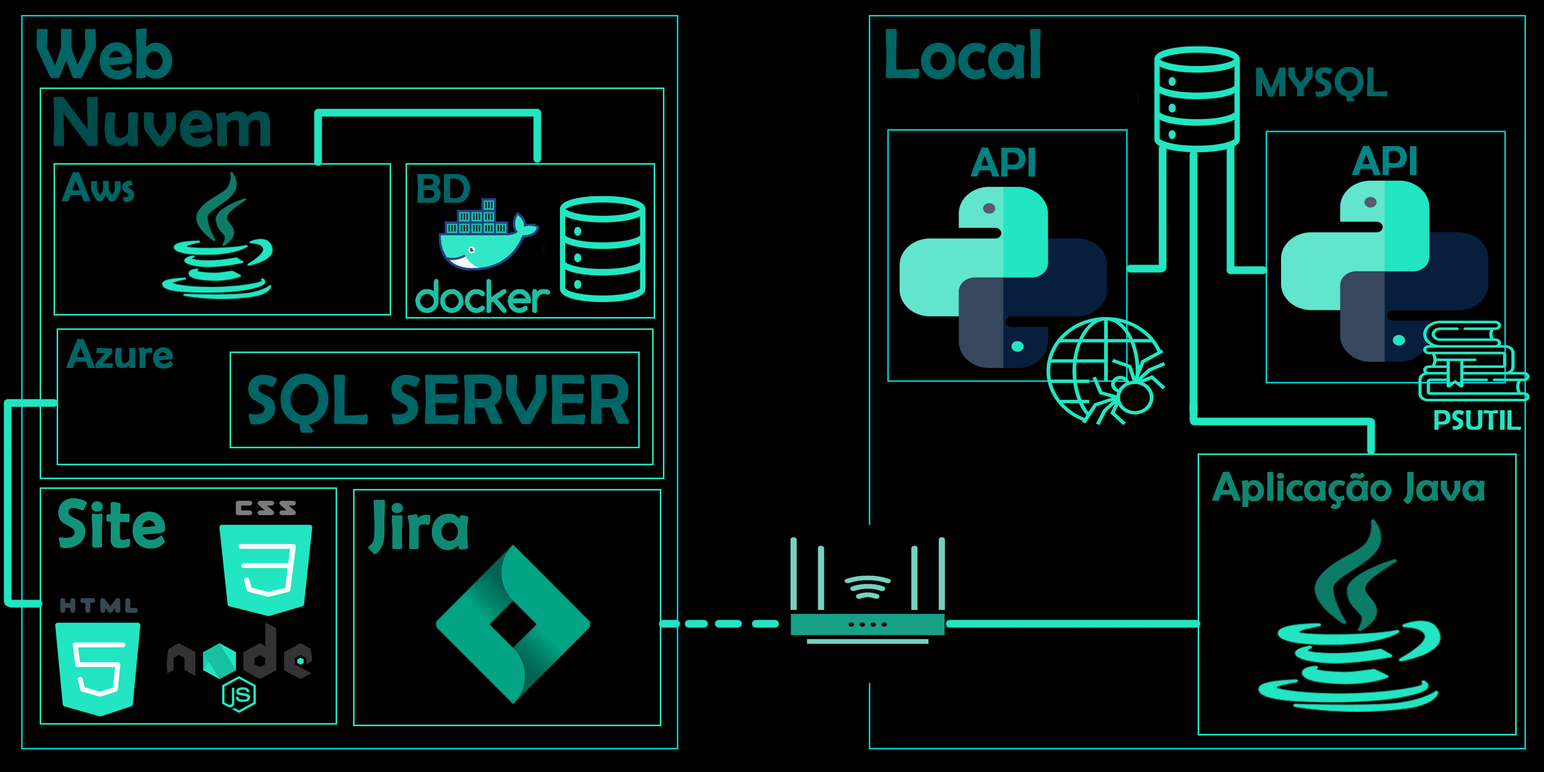
<style>
.page{position:relative;width:1544px;height:772px;background:#000000}
.page>*{position:absolute;margin:0}
.t1{font:69.2px "BerlinSansFB-Reg";color:#006565;font-weight:bold}
.t2{font:41.5px "BerlinSansFB-Reg";color:#006565;font-weight:bold}
.t3{font:69.2px "BerlinSansFB-Reg";color:#004b4b;font-weight:bold}
.t4{font:41.5px "BerlinSansFB-Reg";color:#008080;font-weight:bold}
.t5{font:41.5px "BerlinSansFB-Reg";color:#008585;font-weight:bold}
.t6{font:27.7px "BerlinSansFB-Reg";color:#21e6c1;font-weight:bold}
.t7{font:41.5px "BerlinSansFB-Reg";color:#0e8670;font-weight:bold}
.t8{font:69.2px "BerlinSansFB-Reg";color:#11937a;font-weight:bold}
.t9{font:69.2px "BerlinSansFB-Reg";color:#0f8972;font-weight:bold}
</style>
<div class="page">
<p class="t1" style="left:37px;top:28px;width:135px;height:51px">Web</p>
<p class="t1" style="left:885px;top:29px;width:156px;height:50px">Local</p>
<p class="t2" style="left:1256px;top:67px;width:132px;height:34px">MYSQL</p>
<p class="t3" style="left:53px;top:97px;width:217px;height:50px">Nuvem</p>
<p class="t4" style="left:971px;top:147px;width:65px;height:30px">API</p>
<p class="t5" style="left:1352px;top:146px;width:65px;height:29px">API</p>
<p class="t2" style="left:62px;top:172px;width:72px;height:30px">Aws</p>
<p class="t2" style="left:417px;top:174px;width:53px;height:29px">BD</p>
<p class="t2" style="left:66px;top:339px;width:107px;height:30px">Azure</p>
<p class="t1" style="left:248px;top:374px;width:382px;height:59px">SQL SERVER</p>
<p class="t6" style="left:1435px;top:410px;width:87px;height:20px">PSUTIL</p>
<p class="t7" style="left:1212px;top:472px;width:273px;height:37px">Aplicação Java</p>
<p class="t8" style="left:58px;top:498px;width:107px;height:51px">Site</p>
<p class="t9" style="left:368px;top:500px;width:101px;height:54px">Jira</p>
</div>
